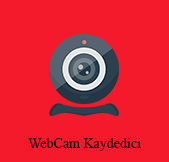
<style>
.page{position:relative;width:169px;height:162px;background:#f4192b}
.page>*{position:absolute;margin:0}
.t1{font:14px "TimesNewRomanPSMT";color:#050505}
</style>
<div class="page">
<p class="t1" style="left:28px;top:138px;width:113px;height:13px">WebCam Kaydedici</p>
</div>
